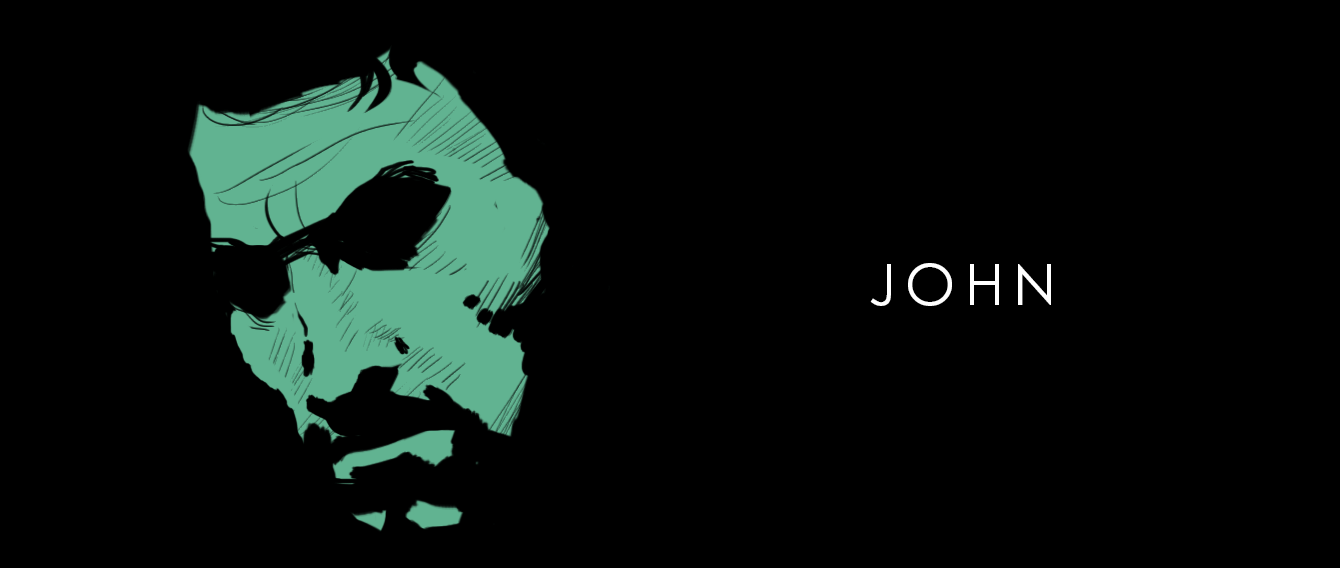
<style>
.page{position:relative;width:1340px;height:568px;background:#000000}
.page>*{position:absolute;margin:0}
.t1{font:57.8px "CenturyGothic";letter-spacing:0.16em;color:#ffffff}
</style>
<div class="page">
<p class="t1" style="left:870px;top:263px;width:181px;height:43px">JOHN</p>
</div>
